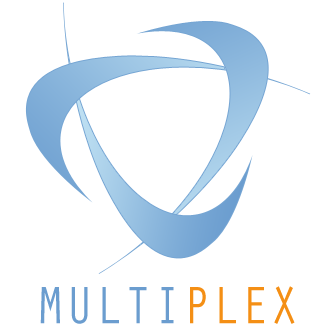
<style>
.page{position:relative;width:328px;height:328px;background:#ffffff}
.page>*{position:absolute;margin:0}
.t1{font:54.2px "OratorStd";color:#6b9dcf;scale:0.9 1}
.t2{font:54.2px "OratorStd";color:#f48f15;scale:0.9 1}
</style>
<div class="page">
<p class="t1" style="left:40px;top:286px;width:255px;height:38px">MULTI<span class="t2">PLEX</span></p>
</div>
